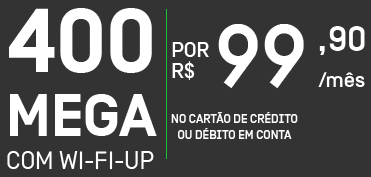
<style>
.page{position:relative;width:371px;height:177px;background:#333333}
.page>*{position:absolute;margin:0}
.t1{font:90.2px "SimplonBP-Bold";color:#ffffff}
.t2{font:90.2px "SimplonOi-Headline";color:#ffffff}
.t3{font:36.1px "SimplonBP-Medium";color:#ffffff}
.t4{font:21px/21px "SimplonBP-Medium";color:#ffffff}
.t5{font:21px "SimplonBP-Medium";color:#ffffff}
.t6{font:60.1px "SimplonBP-Bold";color:#ffffff}
.t7{font:12px/16px "SimplonOi-Headline";color:#fefefe}
.t8{font:25.1px "SimplonBP-Regular";color:#ffffff}
</style>
<div class="page">
<p class="t1" style="left:9px;top:8px;width:143px;height:65px">400</p>
<p class="t2" style="left:218px;top:24px;width:86px;height:65px">99</p>
<p class="t3" style="left:319px;top:26px;width:46px;height:29px">,90</p>
<p class="t4" style="left:172px;top:42px;width:37px;height:38px">POR<br>R$</p>
<p class="t5" style="left:318px;top:72px;width:47px;height:15px">/mês</p>
<p class="t6" style="left:10px;top:94px;width:147px;height:42px">MEGA</p>
<p class="t7" style="left:171px;top:112px;width:127px;height:27px;text-align:center">NO CARTÃO DE CRÉDITO<br>OU DÉBITO EM CONTA</p>
<p class="t8" style="left:7px;top:151px;width:147px;height:19px">COM WI-FI-UP</p>
</div>
